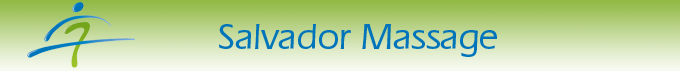
<style>
.page{position:relative;width:680px;height:71px}
.page>*{position:absolute;margin:0}
.t1{font:37px "ErasITCbyBT-Medium";color:#0074ba}
</style>
<div class="page">
<p class="t1" style="left:219px;top:24px;width:278px;height:33px">Salvador Massage</p>
</div>
